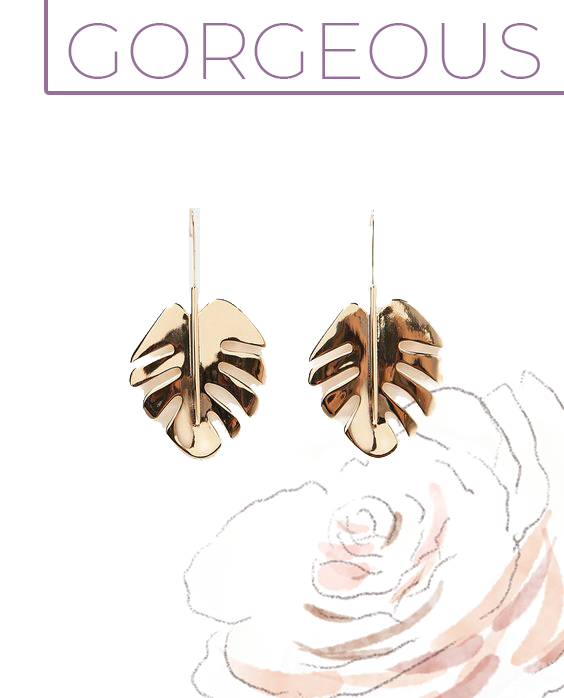
<style>
.page{position:relative;width:564px;height:698px;background:#ffffff}
.page>*{position:absolute;margin:0}
.t1{font:80px "Montserrat-ExtraLight";color:#97709a}
</style>
<div class="page">
<p class="t1" style="left:68px;top:23px;width:472px;height:56px">GORGEOUS</p>
</div>
